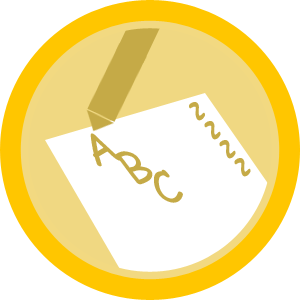
<style>
.page{position:relative;width:300px;height:300px;background:#ffffff}
.page>*{position:absolute;margin:0}
.t1{font:49.8px "ComicSansMS";color:#c5aa47;scale:0.81 1}
.t2{font:49.8px/30px "ComicSansMS";color:#c5aa47;scale:0.81 1}
</style>
<div class="page">
<p class="t1" style="left:189px;top:102px;width:62px;height:75px;rotate:51deg">~~~~</p>
<p class="t2" style="left:90px;top:133px;width:93px;height:70px;text-align:center;rotate:-16deg">A <br>   B <br>     C</p>
</div>
